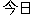
<style>
.page{position:relative;width:32px;height:16px;background:#ffffff}
.page>*{position:absolute;margin:0}
.t1{font:15px "OPPOSans-R";color:#000000}
</style>
<div class="page">
<p class="t1" style="left:3px;top:0px;width:27px;height:15px">今日</p>
</div>
